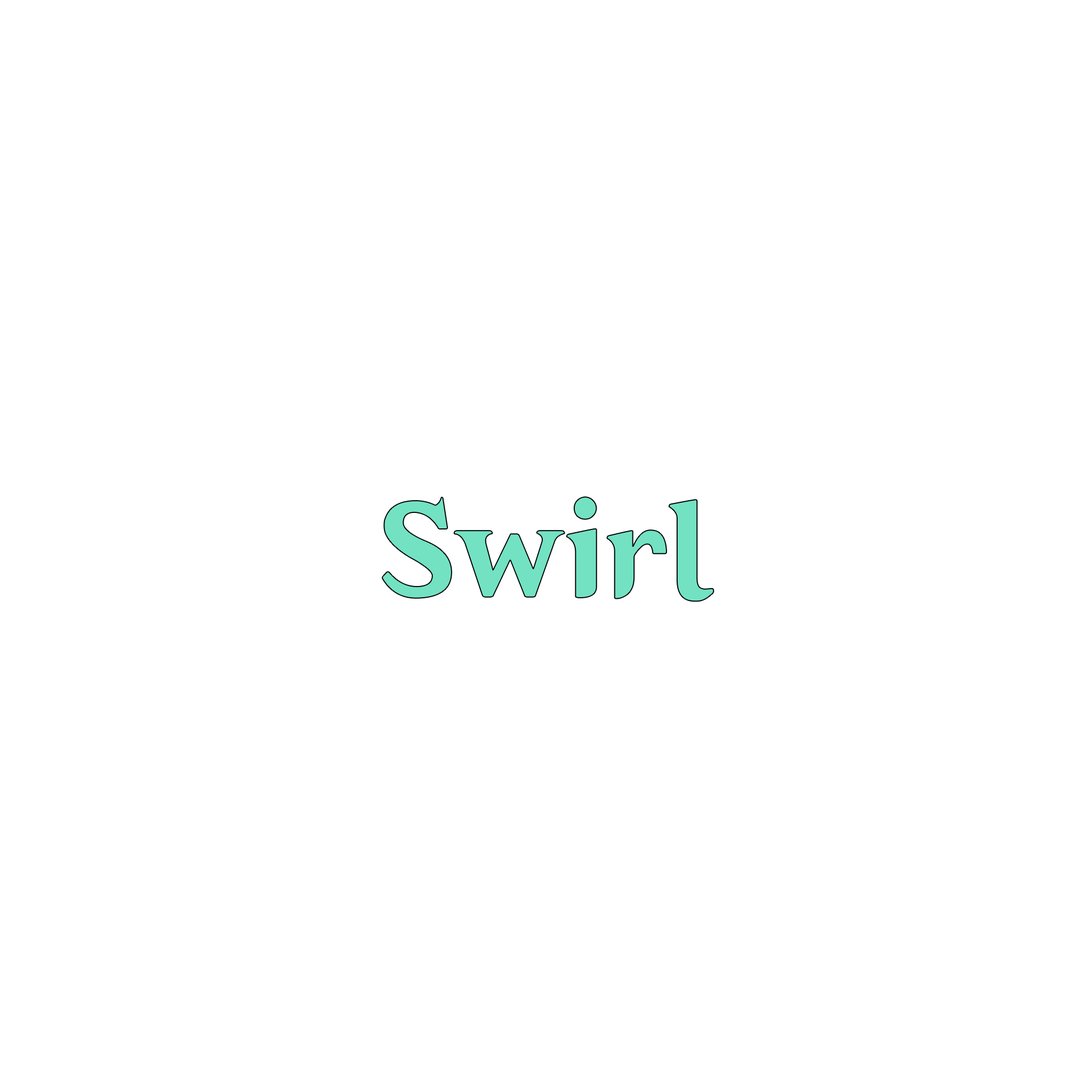
<style>
.page{position:relative;width:1092px;height:1092px;background:#ffffff}
.page>*{position:absolute;margin:0}
.t1{font:122.2px "Default_SC-85W";color:#72e2c3}
</style>
<div class="page">
<p class="t1" style="left:382px;top:497px;width:332px;height:104px">Swirl</p>
</div>
